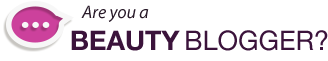
<style>
.page{position:relative;width:328px;height:61px;background:#ffffff}
.page>*{position:absolute;margin:0}
.t1{font:18px "MyriadPro-It";color:#291b29}
.t2{font:27px "HelveticaNeue";color:#3b133b}
.t3{font:27px "HelveticaNeue-Bold";color:#3b133b}
</style>
<div class="page">
<p class="t1" style="left:81px;top:5px;width:68px;height:17px">Are you a</p>
<p class="t2" style="left:71px;top:30px;width:257px;height:21px"><span class="t3">BEAUTY </span>BLOGGER?</p>
</div>
